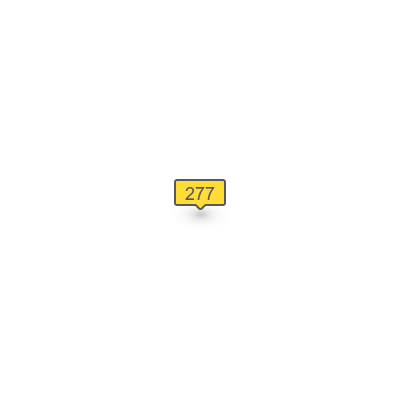
<style>
.page{position:relative;width:400px;height:400px;background:#ffffff}
.page>*{position:absolute;margin:0}
.t1{font:18px "ArialMT";color:#595959}
</style>
<div class="page">
<p class="t1" style="left:185px;top:187px;width:30px;height:13px">277</p>
</div>
